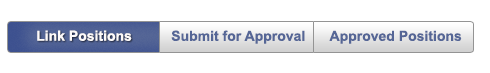
<style>
.page{position:relative;width:490px;height:73px;background:#ffffff}
.page>*{position:absolute;margin:0}
.t1{font:14px "Arial-BoldMT";color:#fdfafa}
.t2{font:14px "Arial-BoldMT";color:#556696}
</style>
<div class="page">
<p class="t1" style="left:37px;top:30px;width:95px;height:11px">Link Positions</p>
<p class="t2" style="left:171px;top:30px;width:134px;height:14px">Submit for Approval</p>
<p class="t2" style="left:329px;top:30px;width:133px;height:14px">Approved Positions</p>
</div>
